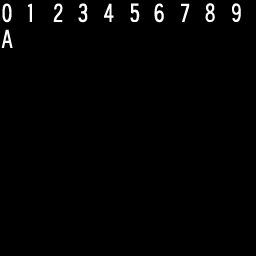
<style>
.page{position:relative;width:256px;height:256px;background:#000000}
.page>*{position:absolute;margin:0}
.t1{font:24px "CHANLPlain";color:#ffffff}
</style>
<div class="page">
<p class="t1" style="left:2px;top:3px;width:10px;height:20px">0</p>
<p class="t1" style="left:28px;top:3px;width:4px;height:19px">1</p>
<p class="t1" style="left:53px;top:3px;width:10px;height:19px">2</p>
<p class="t1" style="left:78px;top:3px;width:10px;height:20px">3</p>
<p class="t1" style="left:104px;top:3px;width:10px;height:19px">4</p>
<p class="t1" style="left:130px;top:3px;width:10px;height:19px">5</p>
<p class="t1" style="left:154px;top:3px;width:10px;height:20px">6</p>
<p class="t1" style="left:181px;top:3px;width:9px;height:19px">7</p>
<p class="t1" style="left:205px;top:3px;width:10px;height:19px">8</p>
<p class="t1" style="left:232px;top:3px;width:9px;height:19px">9</p>
<p class="t1" style="left:1px;top:29px;width:12px;height:19px">A</p>
</div>
